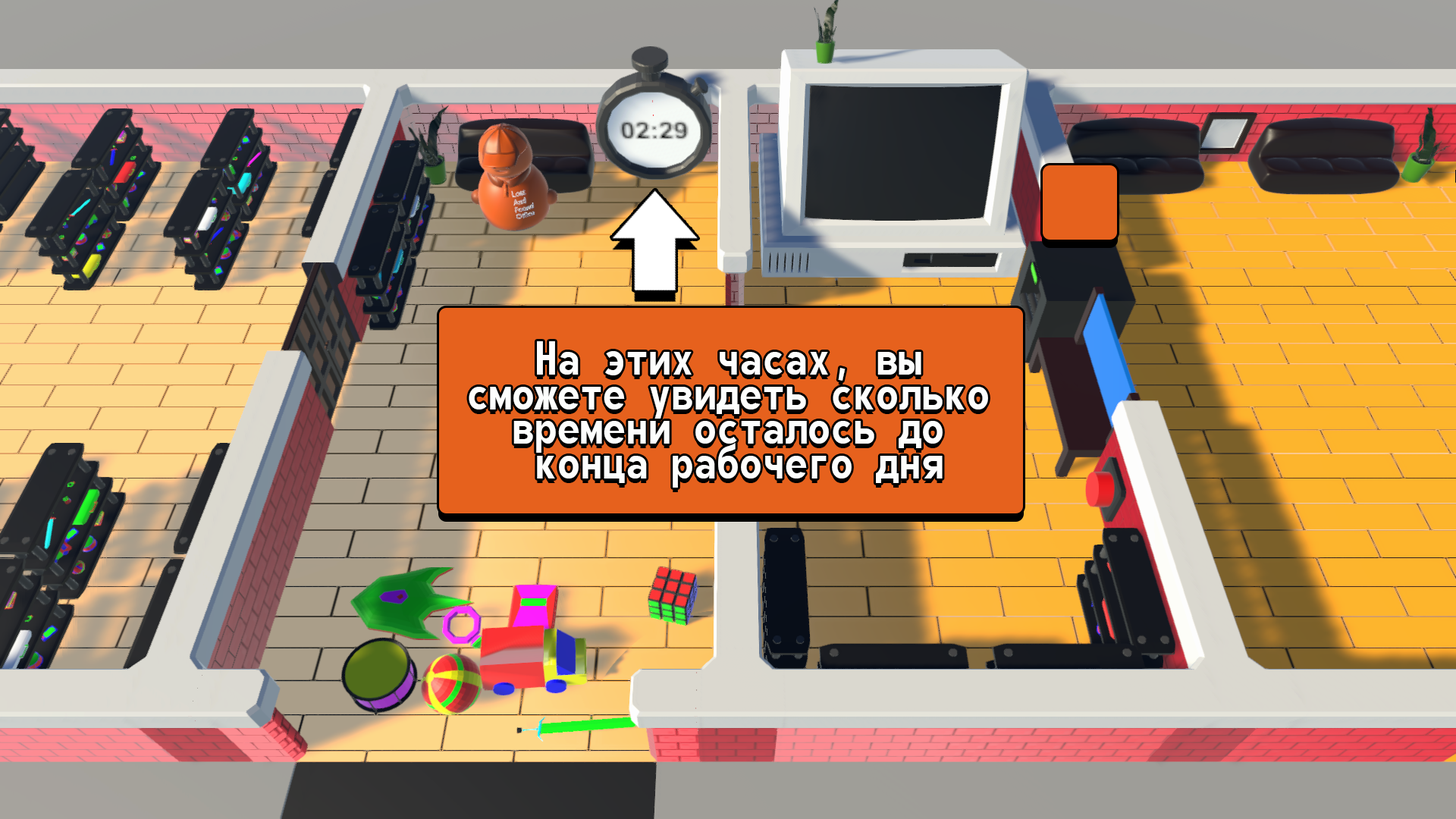
<style>
.page{position:relative;width:1456px;height:819px}
.page>*{position:absolute;margin:0}
.t1{font:56.9px/34.8px "Monofonto";color:#fdfefd}
</style>
<div class="page">
<p class="t1" style="left:469px;top:341px;width:519px;height:147px;text-align:center">На этих часах, вы<br>сможете увидеть сколько<br>времени осталось до<br> конца рабочего дня</p>
</div>
